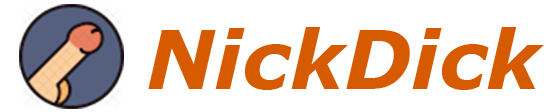
<style>
.page{position:relative;width:560px;height:112px;background:#ffffff}
.page>*{position:absolute;margin:0}
.t1{font:80.8px "Verdana-BoldItalic";color:#d65b00}
</style>
<div class="page">
<p class="t1" style="left:148px;top:27px;width:396px;height:63px">NickDick</p>
</div>
